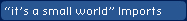
<style>
.page{position:relative;width:187px;height:21px;background:#285692}
.page>*{position:absolute;margin:0}
.t1{font:16px "Foxley816";color:#ffffff}
</style>
<div class="page">
<p class="t1" style="left:5px;top:7px;width:156px;height:10px">“it’s a small world” Imports</p>
</div>
